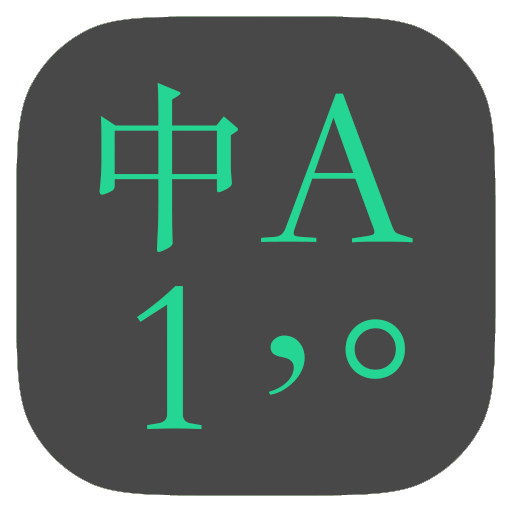
<style>
.page{position:relative;width:512px;height:512px;background:#484848}
.page>*{position:absolute;margin:0}
.t1{font:179.1px "STSongti-SC-Regular";color:#24d594}
.t2{font:223.9px "STSongti-SC-Regular";color:#24d594}
.t3{font:248.8px "STSongti-SC-Regular";color:#24d594}
</style>
<div class="page">
<p class="t1" style="left:99px;top:82px;width:139px;height:170px">中</p>
<p class="t2" style="left:261px;top:93px;width:152px;height:150px">A</p>
<p class="t2" style="left:137px;top:286px;width:65px;height:144px">1</p>
<p class="t3" style="left:268px;top:319px;width:137px;height:76px">,。</p>
</div>
